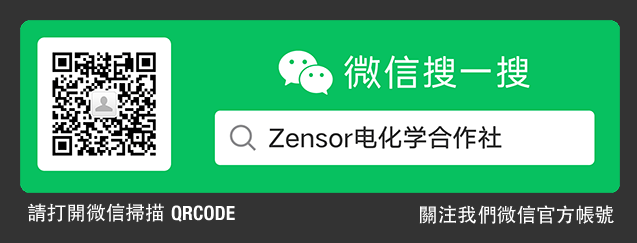
<style>
.page{position:relative;width:637px;height:243px;background:#07c160}
.page>*{position:absolute;margin:0}
.t1{font:19.7px "STHeitiTC-Medium";color:#fefefe}
.t2{font:19.7px "HelveticaNeue-CondensedBold";color:#ffffff}
.t3{font:19.7px "STHeitiTC-Medium";color:#ffffff}
</style>
<div class="page">
<p class="t1" style="left:28px;top:203px;width:136px;height:19px">請打開微信掃描</p>
<p class="t2" style="left:171px;top:205px;width:64px;height:17px">QRCODE</p>
<p class="t3" style="left:419px;top:205px;width:195px;height:19px">關注我們微信官方帳號</p>
</div>
